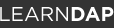
<style>
.page{position:relative;width:114px;height:28px;background:#333333}
.page>*{position:absolute;margin:0}
.t1{font:20px "Gotham-Book";color:#ffffff}
.t2{font:20px "Gotham-Bold";color:#ffffff}
</style>
<div class="page">
<p class="t1" style="left:0px;top:7px;width:114px;height:14px">LEARN<span class="t2">DAP</span></p>
</div>
